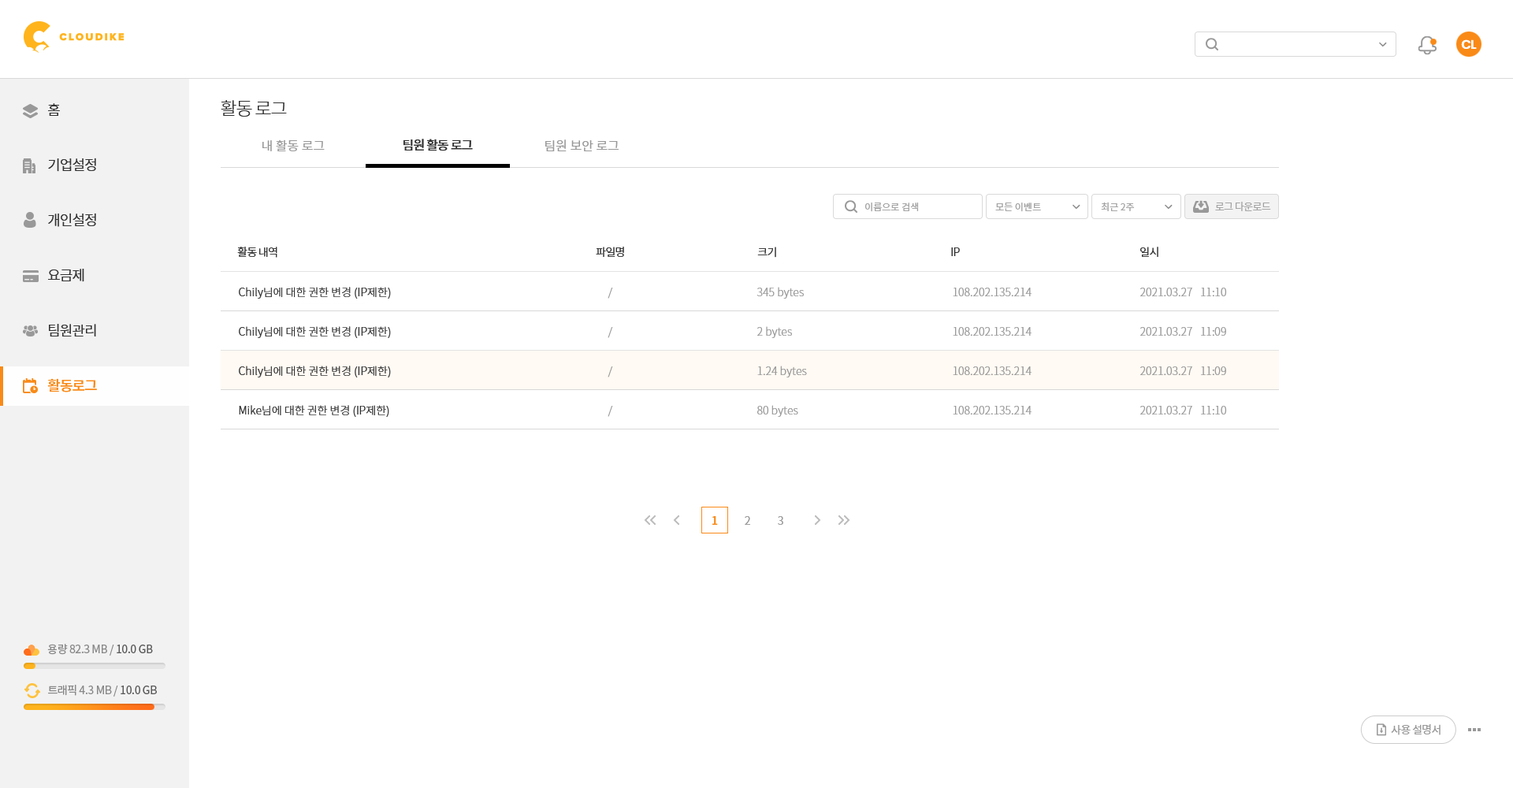
<style>
.page{position:relative;width:1513px;height:788px;background:#ffffff}
.page>*{position:absolute;margin:0}
.t1{font:12.6px "Poppins-SemiBold";letter-spacing:-0.05em;color:#ffffff}
.t2{font:18.1px "NotoSansCJKkr-Light";letter-spacing:-0.05em;color:#333333}
.t3{font:14.2px/55.2px "NotoSansCJKkr-DemiLight";letter-spacing:-0.05em;color:#333333}
.t4{font:14.2px/55.2px "NotoSansCJKkr-Medium";letter-spacing:-0.05em;color:#f98a17}
.t5{font:12.6px "NotoSansCJKkr-DemiLight";color:#999999}
.t6{font:12.6px "NotoSansCJKkr-Medium";letter-spacing:-0.05em;color:#333333}
.t7{font:9.5px "NotoSansCJKkr-DemiLight";color:#a1a1a1}
.t8{font:10.2px "NotoSansCJKkr-DemiLight";letter-spacing:-0.05em;color:#a1a1a1}
.t9{font:11px "NotoSansCJKkr-DemiLight";letter-spacing:-0.05em;color:#333333}
.t10{font:11px/39.4px "NotoSansCJKkr-Light";color:#333333}
.t11{font:11px/39.4px "NotoSansCJKkr-Light";color:#999999}
.t12{font:11px "NotoSansCJKkr-Medium";color:#f98a17}
.t13{font:11px "NotoSansCJKkr-DemiLight";color:#999999}
.t14{font:11px "NotoSansCJKkr-Regular";letter-spacing:-0.025em;color:#888888}
.t15{font:11px "NotoSansCJKkr-Regular";letter-spacing:-0.025em;color:#585858}
.t16{font:11px "NotoSansCJKkr-Regular";letter-spacing:-0.05em;color:#999999}
</style>
<div class="page">
<p class="t1" style="left:1461px;top:39px;width:16px;height:10px">CL</p>
<p class="t2" style="left:221px;top:100px;width:66px;height:17px">활동 로그</p>
<p class="t3" style="left:47px;top:103px;width:50px;height:289px">홈<br>기업설정<br>개인설정<br>요금제<br>팀원관리<br><span class="t4">활동로그</span></p>
<p class="t5" style="left:262px;top:139px;width:63px;height:12px">내 활동 로그</p>
<p class="t6" style="left:403px;top:139px;width:70px;height:12px">팀원 활동 로그</p>
<p class="t5" style="left:545px;top:139px;width:74px;height:12px">팀원 보안 로그</p>
<p class="t7" style="left:865px;top:203px;width:54px;height:9px">이름으로 검색</p>
<p class="t7" style="left:995px;top:203px;width:46px;height:9px">모든 이벤트</p>
<p class="t7" style="left:1101px;top:202px;width:34px;height:9px">최근 2주</p>
<p class="t8" style="left:1215px;top:202px;width:56px;height:9px">로그 다운로드</p>
<p class="t9" style="left:237px;top:247px;width:40px;height:11px">활동 내역</p>
<p class="t9" style="left:596px;top:247px;width:28px;height:10px">파일명</p>
<p class="t9" style="left:757px;top:247px;width:19px;height:11px">크기</p>
<p class="t9" style="left:951px;top:247px;width:9px;height:9px">IP</p>
<p class="t9" style="left:1140px;top:247px;width:18px;height:10px">일시</p>
<p class="t10" style="left:239px;top:287px;width:152px;height:130px">Chily님에 대한 권한 변경 (IP제한)<br>Chily님에 대한 권한 변경 (IP제한)<br>Chily님에 대한 권한 변경 (IP제한)<br>Mike님에 대한 권한 변경 (IP제한)</p>
<p class="t11" style="left:608px;top:288px;width:5px;height:129px">/<br>/<br>/<br>/</p>
<p class="t11" style="left:757px;top:287px;width:50px;height:130px">345 bytes<br>2 bytes<br>1.24 bytes<br>80 bytes</p>
<p class="t11" style="left:953px;top:288px;width:79px;height:127px">108.202.135.214<br>108.202.135.214<br>108.202.135.214<br>108.202.135.214</p>
<p class="t11" style="left:1140px;top:288px;width:87px;height:127px">2021.03.27   11:10<br>2021.03.27   11:09<br>2021.03.27   11:09<br>2021.03.27   11:10</p>
<p class="t12" style="left:712px;top:516px;width:6px;height:9px">1</p>
<p class="t13" style="left:745px;top:516px;width:5px;height:9px">2</p>
<p class="t13" style="left:778px;top:516px;width:5px;height:9px">3</p>
<p class="t14" style="left:47px;top:644px;width:106px;height:12px">용량 82.3 MB / <span class="t15">10.0 GB</span></p>
<p class="t14" style="left:48px;top:685px;width:109px;height:12px">트래픽 4.3 MB / <span class="t15">10.0 GB</span></p>
<p class="t16" style="left:1391px;top:724px;width:50px;height:11px">사용 설명서</p>
</div>
